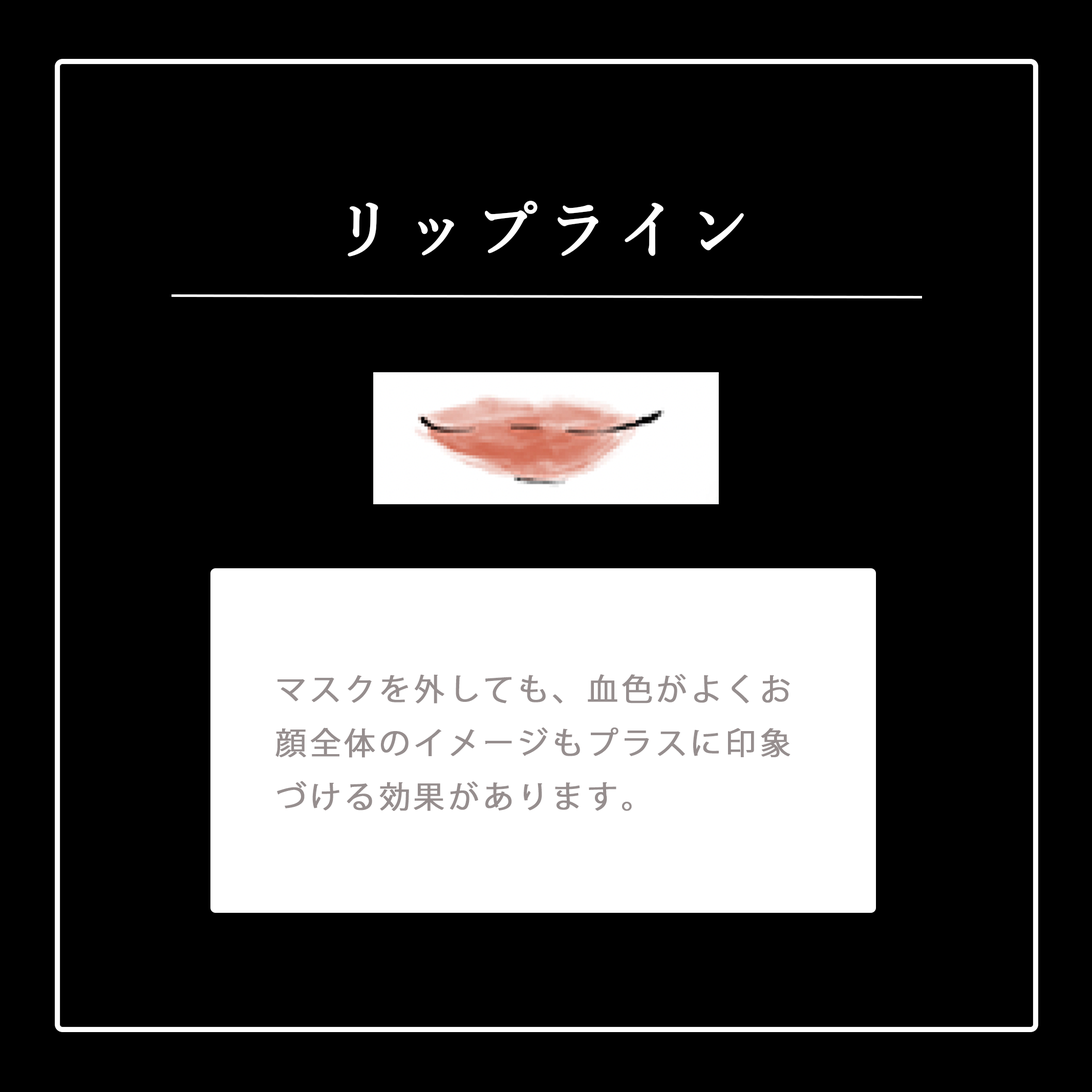
<style>
.page{position:relative;width:1092px;height:1092px;background:#000000}
.page>*{position:absolute;margin:0}
.t1{font:63px "YuMin-Medium";letter-spacing:0.1em;color:#ffffff;font-weight:bold}
.t2{font:30.7px "KozGoPr6N-Regular";letter-spacing:0.1em;color:#968e8e;font-weight:bold}
</style>
<div class="page">
<p class="t1" style="left:348px;top:201px;width:396px;height:55px">リップライン</p>
<p class="t2" style="left:275px;top:674px;width:515px;height:137px">マスクを外しても、血色がよくお顔全体のイメージもプラスに印象づける効果があります。</p>
</div>
